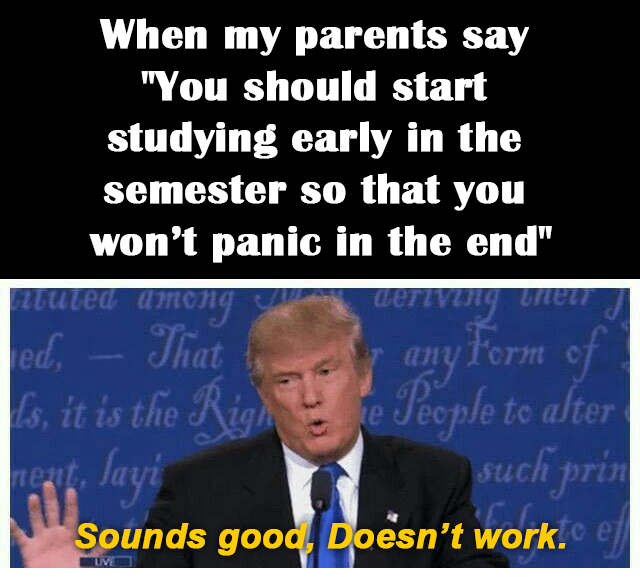
<style>
.page{position:relative;width:640px;height:577px;background:#000000}
.page>*{position:absolute;margin:0}
.t1{font:43.2px "BritannicBold";color:#ffffff;font-weight:bold}
.t2{font:34.8px "Arial-BoldItalicMT";color:#ffcc00;font-weight:bold}
</style>
<div class="page">
<p class="t1" style="left:89px;top:18px;width:463px;height:245px;text-align:center">When my parents say <br>"You should start <br>studying early in the <br>semester so that you <br>won’t panic in the end"</p>
<p class="t2" style="left:75px;top:523px;width:491px;height:33px">Sounds good, Doesn’t work.</p>
</div>
